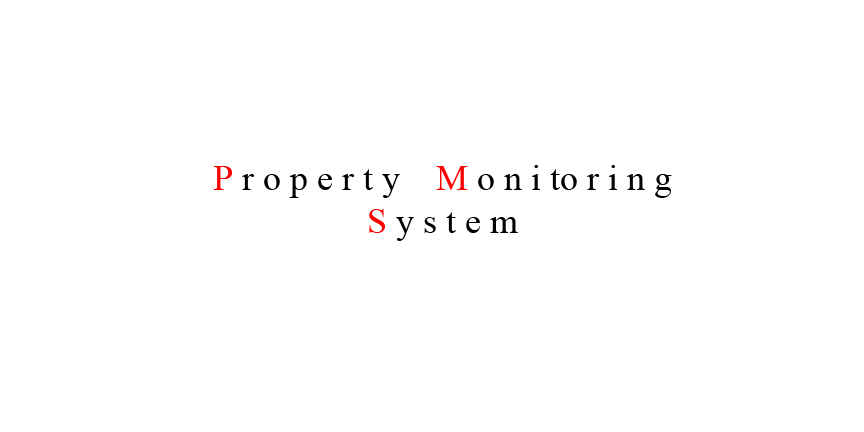
<style>
.page{position:relative;width:864px;height:432px;background:#ffffff}
.page>*{position:absolute;margin:0}
.t1{font:36px "TimesNewRomanPSMT";color:#020202}
.t2{font:36px "TimesNewRomanPSMT";color:#ff0000}
</style>
<div class="page">
<p class="t1" style="left:213px;top:165px;width:459px;height:76px;text-align:center"><span class="t2">P </span>r o p e r t y    <span class="t2">M </span>o n i to r i n g <br><span class="t2">S </span>y s t e m</p>
</div>
